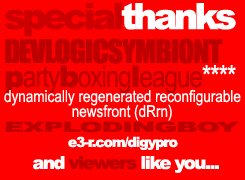
<style>
.page{position:relative;width:245px;height:180px;background:#ff0000}
.page>*{position:absolute;margin:0}
.t1{font:36px "Arial-Black";letter-spacing:-0.1em;color:#cc0000}
.t2{font:36px "Arial-Black";letter-spacing:-0.1em;color:#ffffff}
.t3{font:16.5px/15px "ArialNarrow";color:#ffffff}
.t4{font:30px/24px "Impact";letter-spacing:-0.06em;color:#bd0000}
.t5{font:30px/24px "Impact";letter-spacing:-0.04em;color:#bd0000}
.t6{font:30px/24px "Arial-Black";letter-spacing:-0.04em;color:#bd0000}
.t7{font:30px/24px "ArialNarrow";letter-spacing:-0.04em;color:#bd0000}
.t8{font:30px/24px "ArialNarrow";letter-spacing:-0.04em;color:#ffffff}
.t9{font:14px/15px "Arial-Black";letter-spacing:-0.08em;color:#bd0000;scale:1.99 1}
.t10{font:14px/15px "Arial-Black";letter-spacing:-0.08em;color:#ffffff}
.t11{font:18px/15px "Arial-Black";letter-spacing:-0.08em;color:#ffffff}
.t12{font:18px/15px "Arial-Black";letter-spacing:-0.08em;color:#bd0000}
</style>
<div class="page">
<p class="t1" style="left:4px;top:3px;width:232px;height:34px">special<span class="t2">thanks</span></p>
<p class="t3" style="left:4px;top:38px;width:237px;height:135px"><span class="t4">D</span><span class="t5">EVLOGICSYMBIONT<br></span><span class="t6">p</span><span class="t7">arty</span><span class="t6">b</span><span class="t7">oxing</span><span class="t6">l</span><span class="t7">eague</span><span class="t8">****<br></span>dynamically regenerated reconfigurable<br>                  newsfront (dRrn)<br><span class="t9">EXPLODINGBOY<br></span><span class="t10">                  e3-r.com/digypro<br>        </span><span class="t11">and </span><span class="t12">viewers</span><span class="t11"> like you...</span></p>
</div>
